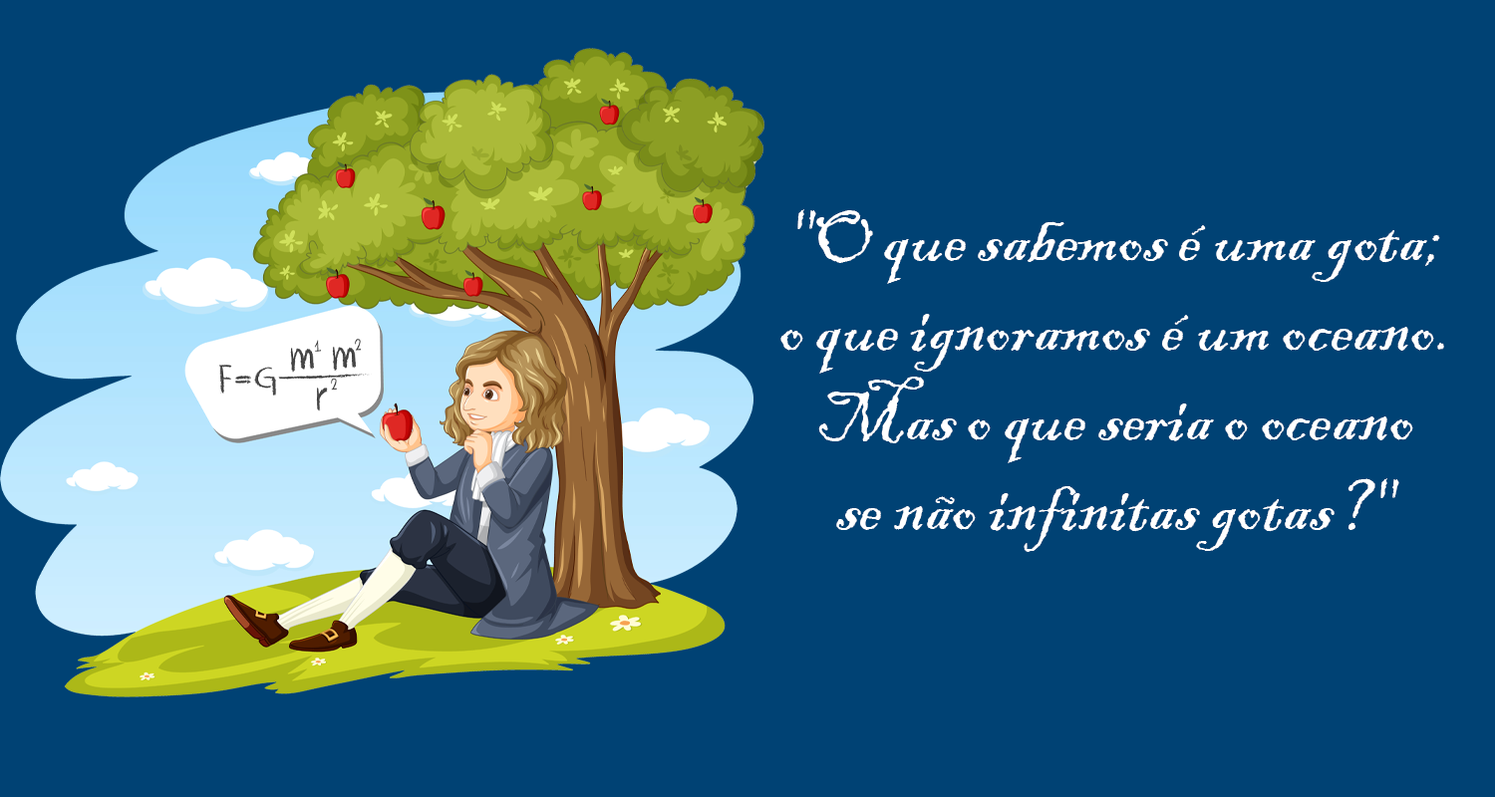
<style>
.page{position:relative;width:1495px;height:797px;background:#004274}
.page>*{position:absolute;margin:0}
.t1{font:74.8px "BlackadderITC-Regular";color:#ffffff}
</style>
<div class="page">
<p class="t1" style="left:781px;top:209px;width:663px;height:343px;text-align:center">"O que sabemos é uma gota; <br>o que ignoramos é um oceano. <br>Mas o que seria o oceano <br>se não infinitas gotas?"</p>
</div>
